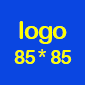
<style>
.page{position:relative;width:85px;height:85px;background:#0a46e1}
.page>*{position:absolute;margin:0}
.t1{font:18.8px/25px "ArialRoundedMTBold";letter-spacing:-0.04em;color:#ffff00}
.t2{font:25px "ArialRoundedMTBold";letter-spacing:-0.04em;color:#ffff00}
</style>
<div class="page">
<p class="t1" style="left:14px;top:21px;width:58px;height:43px;text-align:center"><span class="t2">logo<br></span>85 * 85</p>
</div>
